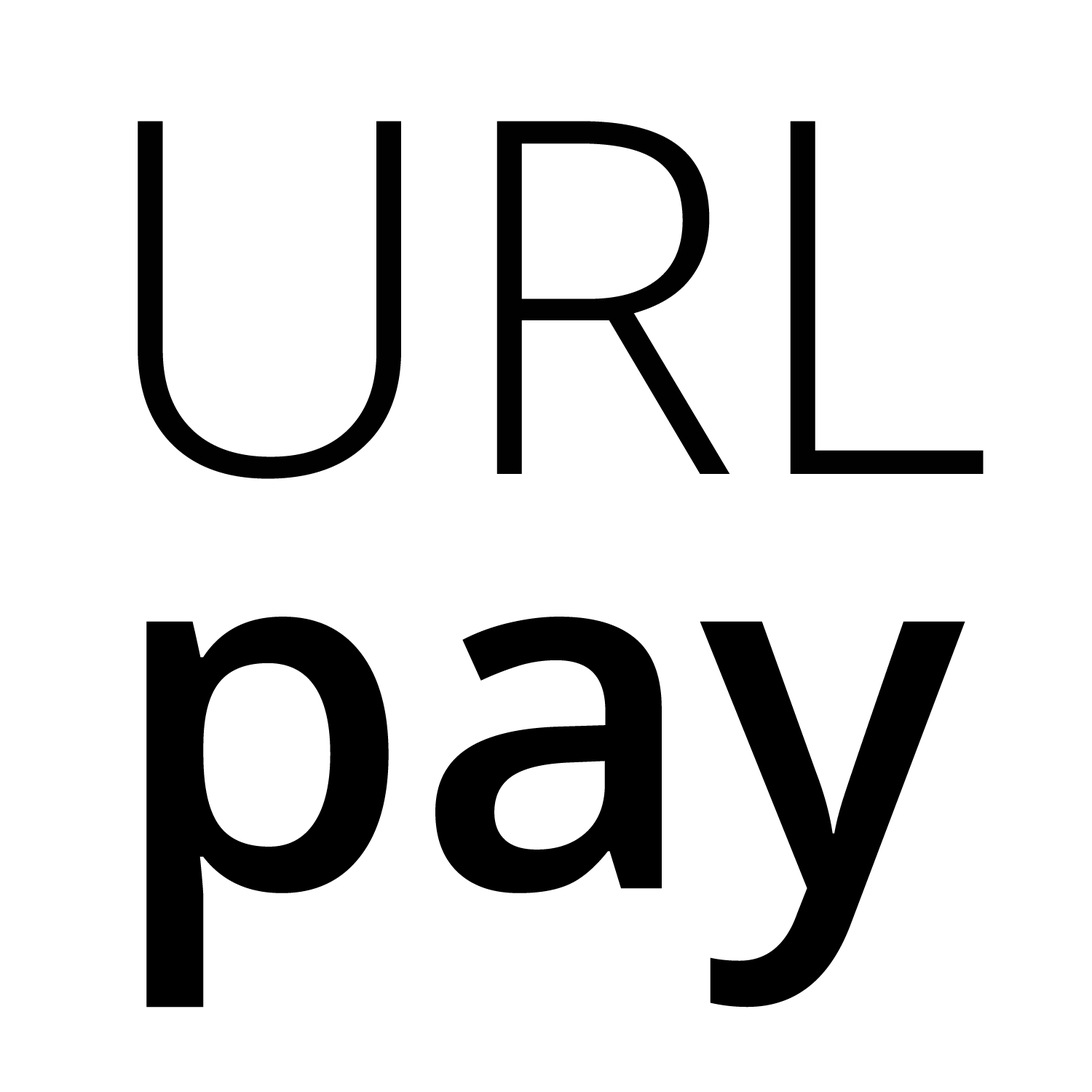
<style>
.page{position:relative;width:1092px;height:1092px;background:#ffffff}
.page>*{position:absolute;margin:0}
.t1{font:493.7px "OpenSans-Light";color:#010101}
.t2{font:493.7px "OpenSans-Semibold";color:#000000}
</style>
<div class="page">
<p class="t1" style="left:138px;top:121px;width:846px;height:358px">URL</p>
<p class="t2" style="left:146px;top:617px;width:819px;height:391px">pay</p>
</div>
